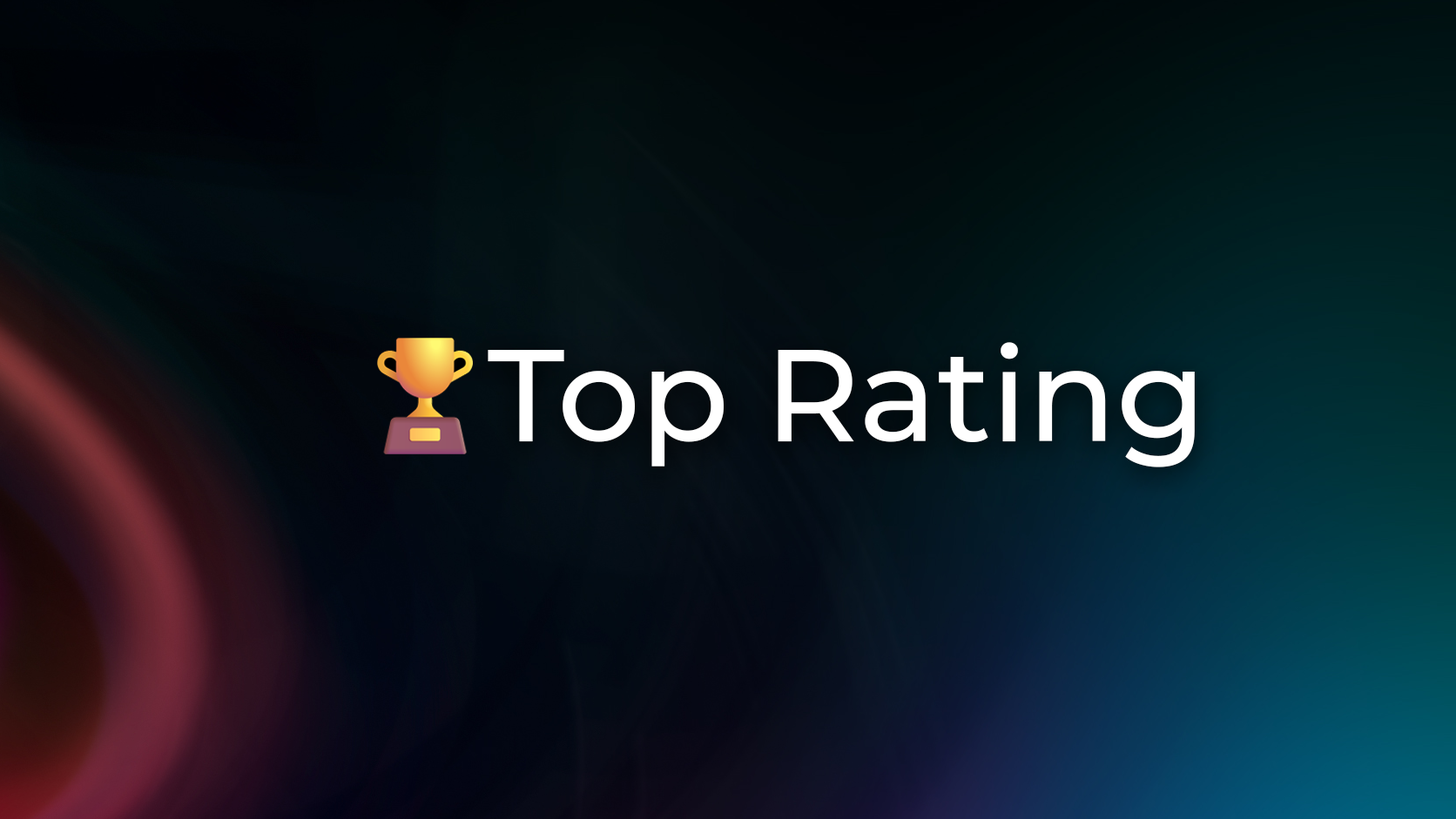
<style>
.page{position:relative;width:1456px;height:819px}
.page>*{position:absolute;margin:0}
.t1{font:130.6px "Montserrat-Medium";color:#ffffff}
</style>
<div class="page">
<p class="t1" style="left:488px;top:342px;width:706px;height:125px">Top Rating</p>
</div>
